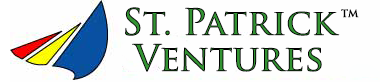
<style>
.page{position:relative;width:380px;height:82px;background:#fefefe}
.page>*{position:absolute;margin:0}
.t1{font:36px "TrajanPro-Bold"}
.t2{font:10px "TrajanPro-Bold";color:#000000}
</style>
<div class="page">
<p class="t1" style="left:125px;top:7px;width:215px;height:29px">St. Patrick</p>
<p class="t2" style="left:341px;top:9px;width:18px;height:9px">TM</p>
<p class="t1" style="left:132px;top:43px;width:190px;height:29px">Ventures</p>
</div>
